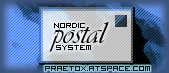
<style>
.page{position:relative;width:169px;height:73px}
.page>*{position:absolute;margin:0}
.t1{font:32px "Vivaldii";color:#000000}
.t2{font:12px "VisitorTT2BRK";color:#000000}
.t3{font:12px "VisitorTT2BRK";color:#0c131c}
</style>
<div class="page">
<p class="t1" style="left:49px;top:22px;width:60px;height:30px">postal</p>
<p class="t2" style="left:54px;top:23px;width:31px;height:5px">Nordic</p>
<p class="t2" style="left:56px;top:45px;width:35px;height:5px">System</p>
<p class="t3" style="left:45px;top:66px;width:105px;height:5px">praetox.atspace.com</p>
</div>
